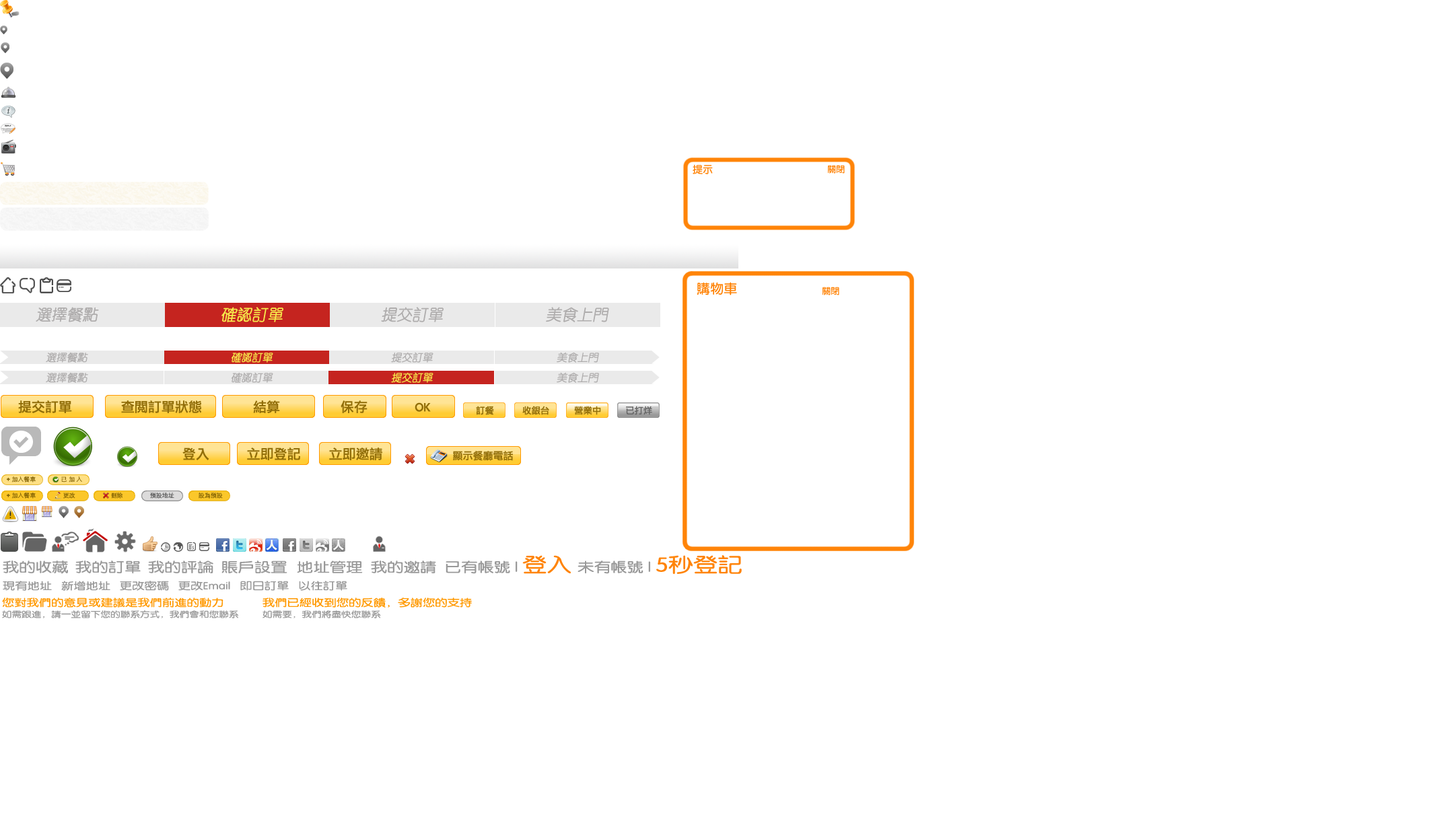
<style>
.page{position:relative;width:1431px;height:833px;background:#ffffff}
.page>*{position:absolute;margin:0}
.t1{font:10.1px "FZY3K--GBK1-0";color:#ff8408}
.t2{font:8.8px "FZY3K--GBK1-0";color:#ff8408}
.t3{font:13.5px "FZY3K--GBK1-0";color:#ff8408}
.t4{font:15.1px "FZY1K--GBK1-0";color:#afadad;font-weight:bold;font-style:italic}
.t5{font:15.1px "FZY1K--GBK1-0";color:#f7ec4b;font-weight:bold;font-style:italic}
.t6{font:10.1px "FZY1K--GBK1-0";color:#afadad;font-weight:bold;font-style:italic}
.t7{font:10.1px "FZY1K--GBK1-0";color:#f7ec4b;font-weight:bold;font-style:italic}
.t8{font:13.5px "LiGothicMed";color:#916e09}
.t9{font:9px "LiGothicMed";color:#916e09}
.t10{font:9px "LiGothicMed";color:#666666}
.t11{font:10.1px "LiGothicMed";color:#916e09}
.t12{font:6.1px "STHeitiSC-Light";color:#7f6003}
.t13{font:6.1px "ArialRoundedMTBold";color:#7f6003}
.t14{font:6.1px "STHeitiSC-Light"}
.t15{font:6.1px "ArialRoundedMTBold"}
.t16{font:6.1px "STHeitiSC-Light";color:#525252}
.t17{font:13.5px "FZY3K--GBK1-0";color:#999999;scale:1.22 1}
.t18{font:20.2px "FZY3K--GBK1-0";color:#ff8408;scale:1.22 1}
.t19{font:10.1px "FZY3K--GBK1-0";color:#999999;scale:1.22 1}
.t20{font:8.1px/12.8px "FZY3K--GBK1-0";color:#999999;scale:1.22 1}
.t21{font:10.1px/12.8px "FZY3K--GBK1-0";color:#ff9900;scale:1.22 1}
</style>
<div class="page">
<p class="t1" style="left:693px;top:164px;width:20px;height:10px">提示</p>
<p class="t2" style="left:828px;top:165px;width:17px;height:9px">關閉</p>
<p class="t3" style="left:697px;top:282px;width:40px;height:13px">購物車</p>
<p class="t2" style="left:823px;top:287px;width:16px;height:8px">關閉</p>
<p class="t4" style="left:36px;top:307px;width:63px;height:15px">選擇餐點</p>
<p class="t5" style="left:221px;top:307px;width:62px;height:15px">確認訂單</p>
<p class="t4" style="left:381px;top:307px;width:63px;height:15px">提交訂單</p>
<p class="t4" style="left:546px;top:307px;width:63px;height:15px">美食上門</p>
<p class="t6" style="left:46px;top:352px;width:42px;height:11px">選擇餐點</p>
<p class="t7" style="left:231px;top:352px;width:42px;height:11px">確認訂單</p>
<p class="t6" style="left:391px;top:352px;width:42px;height:11px">提交訂單</p>
<p class="t6" style="left:557px;top:352px;width:42px;height:11px">美食上門</p>
<p class="t6" style="left:46px;top:372px;width:42px;height:11px">選擇餐點</p>
<p class="t6" style="left:231px;top:372px;width:42px;height:11px">確認訂單</p>
<p class="t7" style="left:391px;top:372px;width:42px;height:11px">提交訂單</p>
<p class="t6" style="left:557px;top:372px;width:42px;height:11px">美食上門</p>
<p class="t8" style="left:18px;top:400px;width:54px;height:13px">提交訂單</p>
<p class="t8" style="left:121px;top:400px;width:81px;height:13px">查閱訂單狀態</p>
<p class="t8" style="left:253px;top:400px;width:27px;height:13px">結算</p>
<p class="t8" style="left:341px;top:400px;width:27px;height:13px">保存</p>
<p class="t8" style="left:415px;top:403px;width:16px;height:9px">OK</p>
<p class="t9" style="left:476px;top:406px;width:18px;height:9px">訂餐</p>
<p class="t9" style="left:522px;top:406px;width:27px;height:9px">收銀台</p>
<p class="t9" style="left:574px;top:406px;width:27px;height:9px">營業中</p>
<p class="t10" style="left:626px;top:406px;width:26px;height:9px"><span class="t9"> </span>已打烊</p>
<p class="t8" style="left:182px;top:448px;width:27px;height:12px">登入</p>
<p class="t8" style="left:247px;top:448px;width:53px;height:12px">立即登記</p>
<p class="t8" style="left:329px;top:448px;width:53px;height:12px">立即邀請</p>
<p class="t11" style="left:453px;top:451px;width:60px;height:10px">顯示餐廳電話</p>
<p class="t12" style="left:7px;top:477px;width:29px;height:6px"><span class="t13">+ </span>加入餐車</p>
<p class="t14" style="left:53px;top:477px;width:29px;height:6px"><span class="t15">+   </span>已 加 入</p>
<p class="t12" style="left:7px;top:493px;width:29px;height:6px"><span class="t13">+ </span>加入餐車</p>
<p class="t12" style="left:63px;top:493px;width:12px;height:6px">更改</p>
<p class="t12" style="left:111px;top:493px;width:12px;height:6px">刪除</p>
<p class="t16" style="left:150px;top:493px;width:24px;height:6px">預設地址</p>
<p class="t12" style="left:199px;top:493px;width:24px;height:6px">設為預設</p>
<p class="t17" style="left:297px;top:555px;width:445px;height:20px">地址管理  我的邀請  已有帳號 | <span class="t18">登入 </span>未有帳號 | <span class="t18">5秒登記</span></p>
<p class="t17" style="left:3px;top:561px;width:65px;height:13px">我的收藏</p>
<p class="t17" style="left:75px;top:561px;width:66px;height:13px">我的訂單</p>
<p class="t17" style="left:148px;top:561px;width:65px;height:13px">我的評論</p>
<p class="t17" style="left:221px;top:561px;width:66px;height:12px">賬戶設置</p>
<p class="t19" style="left:3px;top:581px;width:344px;height:10px">現有地址   新增地址   更改密碼   更改Email   即日訂單   以往訂單</p>
<p class="t20" style="left:2px;top:598px;width:236px;height:21px"><span class="t21">您對我們的意見或建議是我們前進的動力 <br></span>如需跟進，請一並留下您的聯系方式，我們會和您聯系</p>
<p class="t21" style="left:263px;top:598px;width:209px;height:21px">我們已經收到您的反饋，多謝您的支持<br><span class="t20">如需要，我們將盡快您聯系</span></p>
</div>
